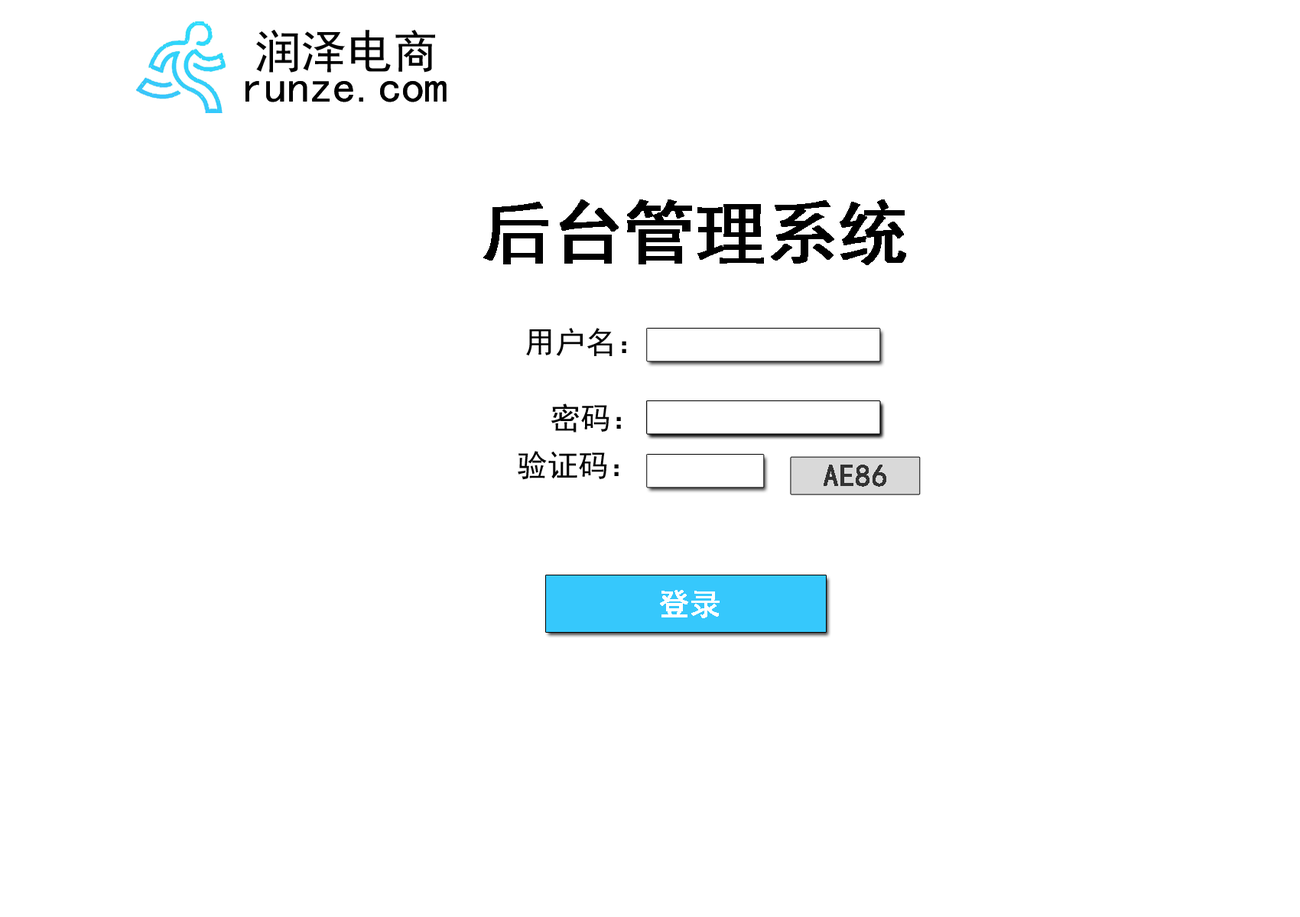
<style>
.page{position:relative;width:1300px;height:917px;background:#ffffff}
.page>*{position:absolute;margin:0}
.t1{font:45.9px "SimHei";color:#010101}
.t2{font:69.6px "SimHei";color:#000000;font-weight:bold}
.t3{font:30.6px "SimHei";color:#000000}
.t4{font:30.6px "SimHei";color:#010101}
.t5{font:30.6px "SimHei";color:#333333;font-weight:bold}
.t6{font:30.6px "SimHei";color:#ffffff;font-weight:bold}
</style>
<div class="page">
<p class="t1" style="left:256px;top:30px;width:179px;height:43px">润泽电商</p>
<p class="t1" style="left:245px;top:81px;width:201px;height:21px">runze.com</p>
<p class="t1" style="left:245px;top:81px;width:201px;height:21px">runze.com</p>
<p class="t2" style="left:483px;top:200px;width:423px;height:65px">后台管理系统</p>
<p class="t3" style="left:526px;top:328px;width:100px;height:28px">用户名：</p>
<p class="t3" style="left:550px;top:404px;width:71px;height:29px">密码：</p>
<p class="t4" style="left:518px;top:451px;width:101px;height:29px">验证码：</p>
<p class="t5" style="left:823px;top:465px;width:63px;height:22px">AE86</p>
<p class="t6" style="left:660px;top:590px;width:59px;height:29px">登录</p>
</div>
